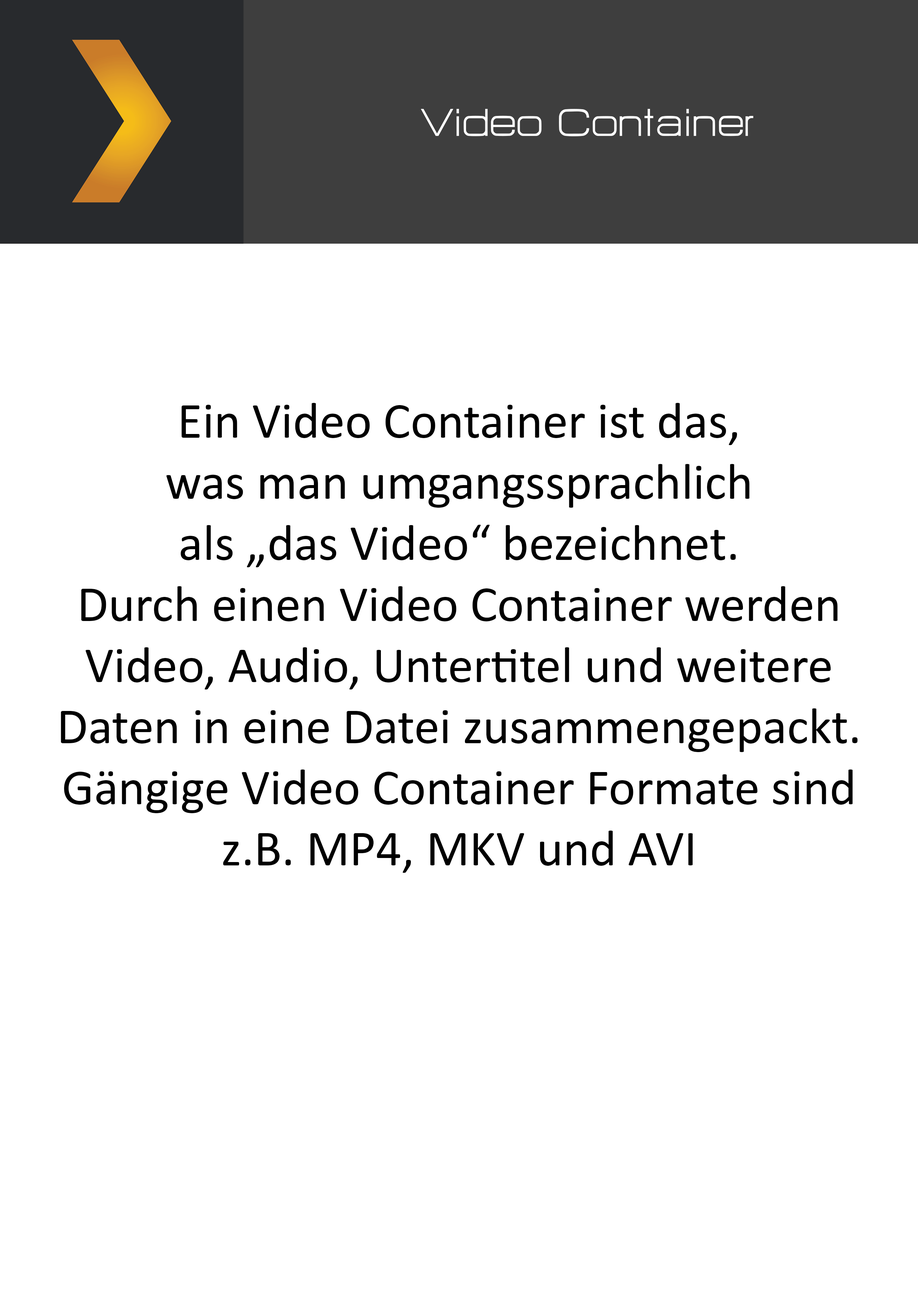
<style>
.page{position:relative;width:918px;height:1299px;background:#ffffff}
.page>*{position:absolute;margin:0}
.t1{font:47.8px "HURTMOLDPersonalUse-Regular";color:#ffffff}
.t2{font:50.9px "Calibri";color:#000000}
</style>
<div class="page">
<p class="t1" style="left:421px;top:109px;width:332px;height:27px">Video Container</p>
<p class="t2" style="left:61px;top:403px;width:797px;height:470px;text-align:center">Ein Video Container ist das,<br>was man umgangssprachlich<br>als „das Video“ bezeichnet.<br>Durch einen Video Container werden<br>Video, Audio, Untertitel und weitere<br>Daten in eine Datei zusammengepackt.<br>Gängige Video Container Formate sind<br>z.B. MP4, MKV und AVI</p>
</div>
